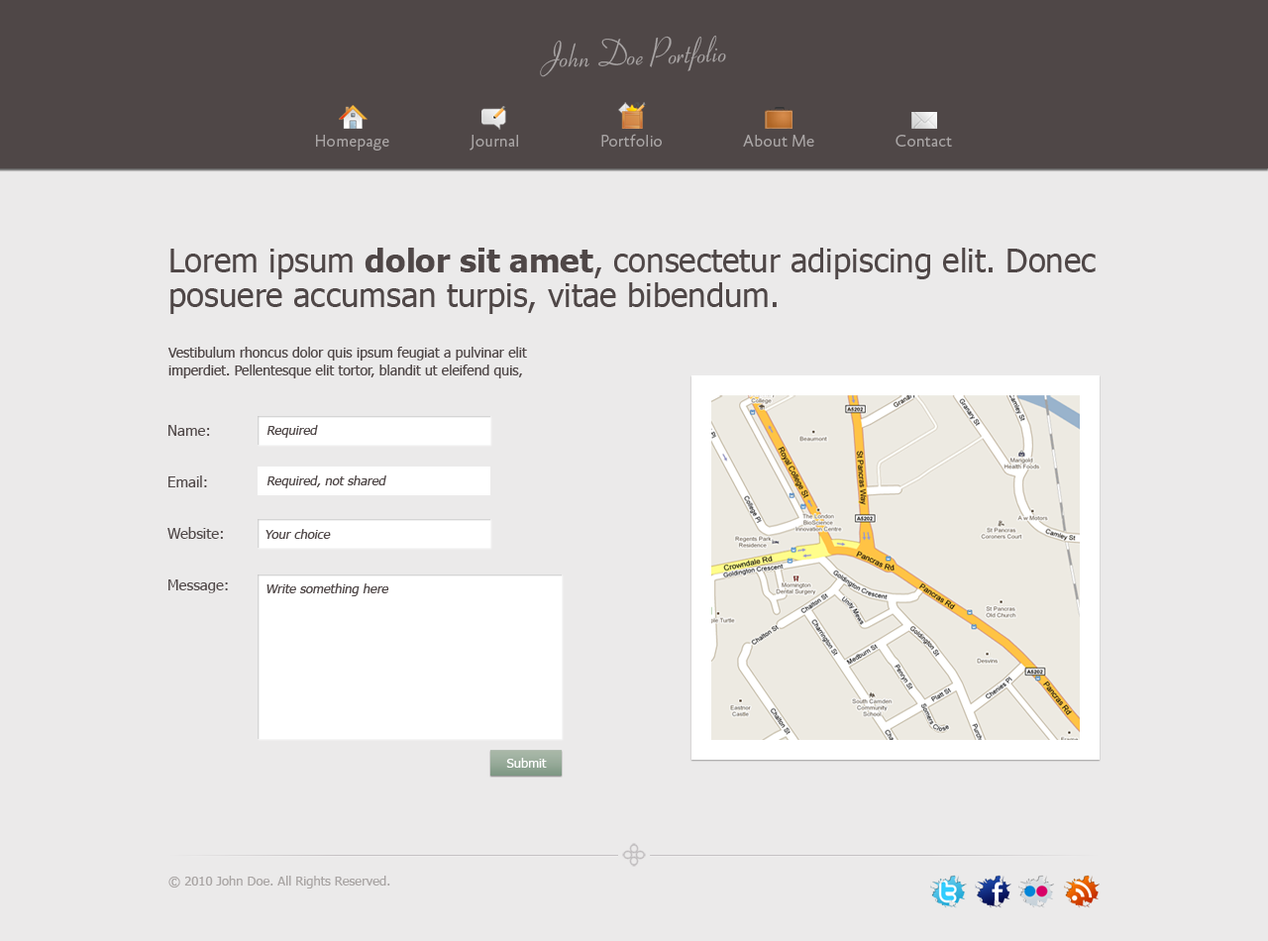
<style>
.page{position:relative;width:1268px;height:941px;background:#ebeaea}
.page>*{position:absolute;margin:0}
.t1{font:36.6px "Ribbon131BT-Regular";color:#a9a5a5}
.t2{font:16.8px "AbsaraSans-Light";color:#a9a5a5}
.t3{font:32.7px/34.7px "Tahoma";color:#4f4747}
.t4{font:32.7px/34.7px "Tahoma-Bold";color:#4f4747}
.t5{font:13.9px/17.8px "Tahoma";color:#4f4747}
.t6{font:14.9px/25.7px "Tahoma";color:#4f4747}
.t7{font:12.9px "Tahoma";color:#4f4747;font-style:italic}
.t8{font:12.9px "Tahoma";color:#ffffff}
.t9{font:12.9px "Tahoma";color:#a9a5a4}
</style>
<div class="page">
<p class="t1" style="left:540px;top:35px;width:186px;height:42px;rotate:-2deg">John Doe Portfolio</p>
<p class="t2" style="left:316px;top:134px;width:636px;height:17px">Homepage                    Journal                    Portfolio                    About Me                    Contact</p>
<p class="t3" style="left:170px;top:248px;width:925px;height:66px">Lorem ipsum <span class="t4">dolor sit amet</span>, consectetur adipiscing elit. Donec posuere accumsan turpis, vitae bibendum.</p>
<p class="t5" style="left:167px;top:347px;width:360px;height:31px">Vestibulum rhoncus dolor quis ipsum feugiat a pulvinar elit imperdiet. Pellentesque elit tortor, blandit ut eleifend quis,</p>
<p class="t6" style="left:167px;top:425px;width:61px;height:168px">Name:<br><br>Email:<br><br>Website:<br><br>Message:</p>
<p class="t7" style="left:266px;top:425px;width:52px;height:13px">Required</p>
<p class="t7" style="left:266px;top:475px;width:120px;height:13px">Required, not shared</p>
<p class="t7" style="left:265px;top:529px;width:66px;height:10px">Your choice</p>
<p class="t7" style="left:266px;top:583px;width:123px;height:13px">Write something here</p>
<p class="t8" style="left:506px;top:758px;width:41px;height:9px">Submit</p>
<p class="t9" style="left:168px;top:875px;width:222px;height:13px">© 2010 John Doe. All Rights Reserved.</p>
</div>
